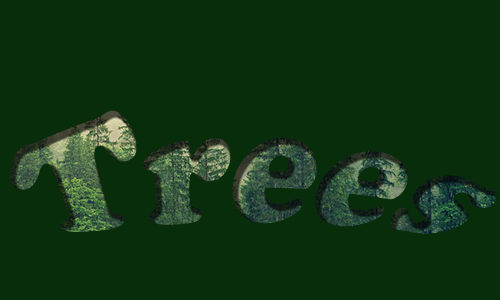
<style>
.page{position:relative;width:500px;height:300px;background:#082d0b}
.page>*{position:absolute;margin:0}
.t1{font:121px "CooperBlack";letter-spacing:0.01em;font-style:italic}
</style>
<div class="page">
<p class="t1" style="left:10px;top:110px;width:487px;height:124px">Trees</p>
</div>
